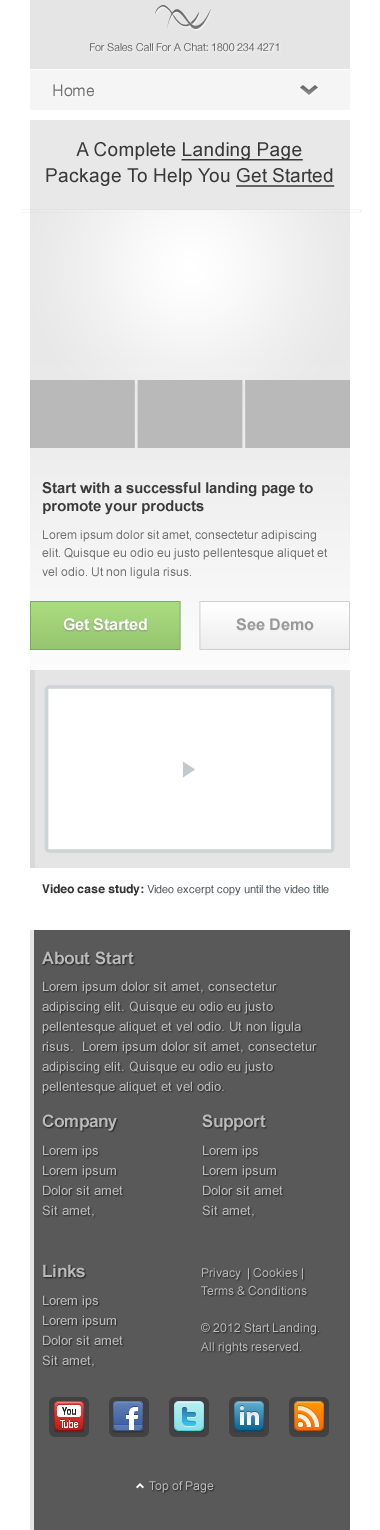
<style>
.page{position:relative;width:380px;height:1530px;background:#ffffff}
.page>*{position:absolute;margin:0}
.t1{font:11px "HelveticaNeue-Roman";letter-spacing:-0.02em;color:#6f6f6f}
.t2{font:16px "HelveticaNeue-Roman";letter-spacing:-0.02em;color:#727272}
.t3{font:19px/26.2px "ArialMT";color:#393939}
.t4{font:19px/26.2px "ArialMT";color:#393939;text-decoration:underline}
.t5{font:15px/18px "Arial-BoldMT";color:#3a3a3a}
.t6{font:12px/18.5px "ArialMT";color:#717171}
.t7{font:16px "Arial-BoldMT";color:#fefefe}
.t8{font:16px "Arial-BoldMT";color:#999999}
.t9{font:11px "Helvetica";color:#53595e}
.t10{font:12px "Helvetica-Bold";color:#333333}
.t11{font:17px "Arial-BoldMT";color:#bbbbbb}
.t12{font:13px/20px "ArialMT";color:#bbbbbb}
.t13{font:17px "Arial-BoldMT";color:#bababa}
.t14{font:13px "ArialMT";color:#bbbbbb}
.t15{font:12px/18.5px "ArialMT";color:#bababa}
.t16{font:12px "ArialMT";color:#bbbbbb}
</style>
<div class="page">
<p class="t1" style="left:90px;top:43px;width:189px;height:9px">For Sales Call For A Chat: 1800 234 4271</p>
<p class="t2" style="left:53px;top:84px;width:41px;height:13px">Home</p>
<p class="t3" style="left:46px;top:142px;width:289px;height:45px;text-align:center">A Complete <span class="t4">Landing Page</span> Package To Help You <span class="t4">Get Started</span></p>
<p class="t5" style="left:42px;top:482px;width:271px;height:33px">Start with a successful landing page to promote your products</p>
<p class="t6" style="left:42px;top:530px;width:286px;height:49px">Lorem ipsum dolor sit amet, consectetur adipiscing elit. Quisque eu odio eu justo pellentesque aliquet et vel odio. Ut non ligula risus.</p>
<p class="t7" style="left:63px;top:618px;width:84px;height:13px">Get Started</p>
<p class="t8" style="left:236px;top:618px;width:78px;height:13px">See Demo</p>
<p class="t9" style="left:42px;top:884px;width:287px;height:12px"><span class="t10">Video case study: </span>Video excerpt copy until the video title</p>
<p class="t11" style="left:42px;top:951px;width:92px;height:14px">About Start</p>
<p class="t12" style="left:42px;top:981px;width:275px;height:113px">Lorem ipsum dolor sit amet, consectetur adipiscing elit. Quisque eu odio eu justo pellentesque aliquet et vel odio. Ut non ligula risus.  Lorem ipsum dolor sit amet, consectetur adipiscing elit. Quisque eu odio eu justo pellentesque aliquet et vel odio.</p>
<p class="t13" style="left:42px;top:1114px;width:75px;height:17px">Company</p>
<p class="t13" style="left:202px;top:1114px;width:64px;height:17px">Support</p>
<p class="t14" style="left:43px;top:1145px;width:55px;height:13px">Lorem ips</p>
<p class="t14" style="left:203px;top:1145px;width:55px;height:13px">Lorem ips</p>
<p class="t14" style="left:43px;top:1165px;width:73px;height:13px">Lorem ipsum</p>
<p class="t14" style="left:203px;top:1165px;width:73px;height:13px">Lorem ipsum</p>
<p class="t14" style="left:43px;top:1185px;width:80px;height:10px">Dolor sit amet</p>
<p class="t14" style="left:203px;top:1185px;width:80px;height:10px">Dolor sit amet</p>
<p class="t14" style="left:42px;top:1205px;width:52px;height:12px">Sit amet,</p>
<p class="t14" style="left:202px;top:1205px;width:52px;height:12px">Sit amet,</p>
<p class="t13" style="left:43px;top:1264px;width:42px;height:14px">Links</p>
<p class="t15" style="left:201px;top:1268px;width:118px;height:86px">Privacy  | Cookies | Terms &amp; Conditions <br><br>© 2012 Start Landing. All rights reserved.</p>
<p class="t14" style="left:43px;top:1295px;width:55px;height:13px">Lorem ips</p>
<p class="t14" style="left:43px;top:1315px;width:73px;height:13px">Lorem ipsum</p>
<p class="t14" style="left:43px;top:1335px;width:80px;height:10px">Dolor sit amet</p>
<p class="t14" style="left:42px;top:1355px;width:52px;height:12px">Sit amet,</p>
<p class="t16" style="left:149px;top:1481px;width:65px;height:12px">Top of Page</p>
</div>
